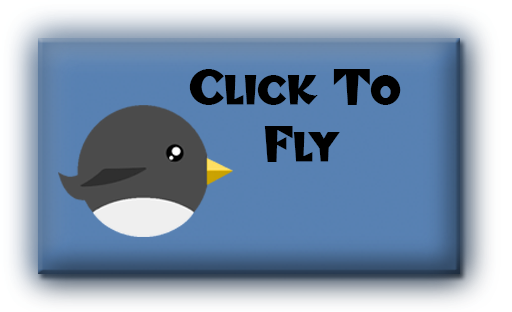
<style>
.page{position:relative;width:512px;height:312px}
.page>*{position:absolute;margin:0}
.t1{font:47.7px "BlitzkriegNF";color:#000000}
</style>
<div class="page">
<p class="t1" style="left:189px;top:69px;width:212px;height:93px;text-align:center">Click To<br> Fly</p>
</div>
